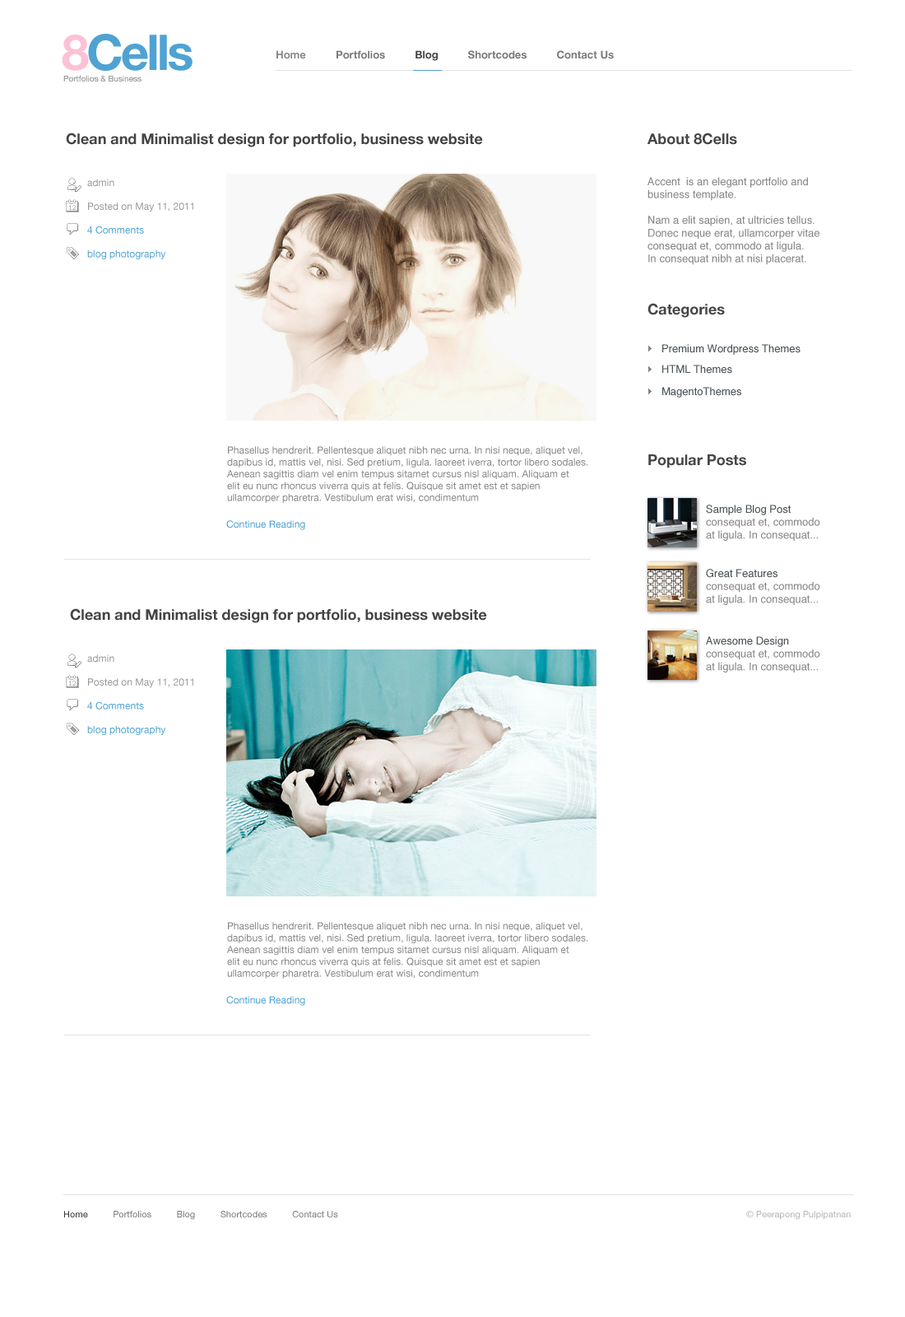
<style>
.page{position:relative;width:905px;height:1317px;background:#ffffff}
.page>*{position:absolute;margin:0}
.t1{font:49.4px "HelveticaNeue-Bold";letter-spacing:-0.05em;color:#4fa3d2}
.t2{font:49.4px "HelveticaNeue-Bold";letter-spacing:-0.05em;color:#fdc1d5}
.t3{font:10.7px "HelveticaNeue-Bold";color:#797979}
.t4{font:10.7px "HelveticaNeue-Bold";color:#888888}
.t5{font:10.7px "HelveticaNeue-Bold";color:#444444}
.t6{font:8.2px "HelveticaNeue";color:#888888}
.t7{font:14.8px "HelveticaNeue-Bold";color:#444444}
.t8{font:14.8px "HelveticaNeue-Bold";color:#464646}
.t9{font:9.9px "HelveticaNeue";color:#999999}
.t10{font:9.9px "HelveticaNeue";color:#4fa3d2}
.t11{font:10.7px "Helvetica";color:#898989}
.t12{font:10.7px "Helvetica";color:#495357}
.t13{font:9.9px "HelveticaNeue";color:#888888}
.t14{font:9.1px "HelveticaNeue";color:#797979}
.t15{font:9.1px "HelveticaNeue";color:#333333}
.t16{font:9.1px "HelveticaNeue";color:#b5b5b5}
</style>
<div class="page">
<p class="t1" style="left:62px;top:34px;width:131px;height:37px"><span class="t2">8</span>Cells</p>
<p class="t3" style="left:277px;top:50px;width:337px;height:11px"><span class="t4">Home          </span>Portfolios          <span class="t5">Blog          </span>Shortcodes          Contact Us</p>
<p class="t6" style="left:63px;top:75px;width:79px;height:6px">Portfolios &amp; Business</p>
<p class="t7" style="left:66px;top:133px;width:417px;height:14px">Clean and Minimalist design for portfolio, business website</p>
<p class="t8" style="left:648px;top:133px;width:90px;height:12px">About 8Cells</p>
<p class="t9" style="left:87px;top:179px;width:106px;height:80px">admin<br><br>Posted on May 11, 2011 <br><br><span class="t10">4 Comments<br><br>blog photography</span></p>
<p class="t11" style="left:648px;top:177px;width:172px;height:88px">Accent  is an elegant portfolio and <br>business template.<br><br>Nam a elit sapien, at ultricies tellus. <br>Donec neque erat, ullamcorper vitae <br>consequat et, commodo at ligula. <br>In consequat nibh at nisi placerat.</p>
<p class="t8" style="left:648px;top:303px;width:77px;height:15px">Categories</p>
<p class="t12" style="left:663px;top:344px;width:138px;height:11px">Premium Wordpress Themes</p>
<p class="t12" style="left:663px;top:365px;width:70px;height:9px">HTML Themes</p>
<p class="t12" style="left:663px;top:387px;width:79px;height:11px">MagentoThemes</p>
<p class="t13" style="left:227px;top:446px;width:362px;height:57px">Phasellus hendrerit. Pellentesque aliquet nibh nec urna. In nisi neque, aliquet vel, <br>dapibus id, mattis vel, nisi. Sed pretium, ligula. laoreet iverra, tortor libero sodales.  <br>Aenean sagittis diam vel enim tempus sitamet cursus nisl aliquam. Aliquam et <br>elit eu nunc rhoncus viverra quis at felis. Quisque sit amet est et sapien <br>ullamcorper pharetra. Vestibulum erat wisi, condimentum</p>
<p class="t8" style="left:649px;top:454px;width:98px;height:14px">Popular Posts</p>
<p class="t11" style="left:706px;top:505px;width:115px;height:36px"><span class="t12">Sample Blog Post <br></span>consequat et, commodo <br>at ligula. In consequat...</p>
<p class="t10" style="left:226px;top:520px;width:79px;height:10px">Continue Reading</p>
<p class="t11" style="left:706px;top:569px;width:115px;height:36px"><span class="t12">Great Features<br></span>consequat et, commodo <br>at ligula. In consequat...</p>
<p class="t7" style="left:70px;top:608px;width:417px;height:15px">Clean and Minimalist design for portfolio, business website</p>
<p class="t11" style="left:706px;top:636px;width:115px;height:36px"><span class="t12">Awesome Design<br></span>consequat et, commodo <br>at ligula. In consequat...</p>
<p class="t9" style="left:87px;top:654px;width:106px;height:81px">admin<br><br>Posted on May 11, 2011 <br><br><span class="t10">4 Comments<br><br>blog photography</span></p>
<p class="t13" style="left:227px;top:922px;width:362px;height:57px">Phasellus hendrerit. Pellentesque aliquet nibh nec urna. In nisi neque, aliquet vel, <br>dapibus id, mattis vel, nisi. Sed pretium, ligula. laoreet iverra, tortor libero sodales.  <br>Aenean sagittis diam vel enim tempus sitamet cursus nisl aliquam. Aliquam et <br>elit eu nunc rhoncus viverra quis at felis. Quisque sit amet est et sapien <br>ullamcorper pharetra. Vestibulum erat wisi, condimentum</p>
<p class="t10" style="left:226px;top:996px;width:79px;height:10px">Continue Reading</p>
<p class="t14" style="left:64px;top:1211px;width:274px;height:9px"><span class="t15">Home          </span>Portfolios          Blog          Shortcodes          Contact Us</p>
<p class="t16" style="left:747px;top:1211px;width:104px;height:9px">© Peerapong Pulpipatnan</p>
</div>
